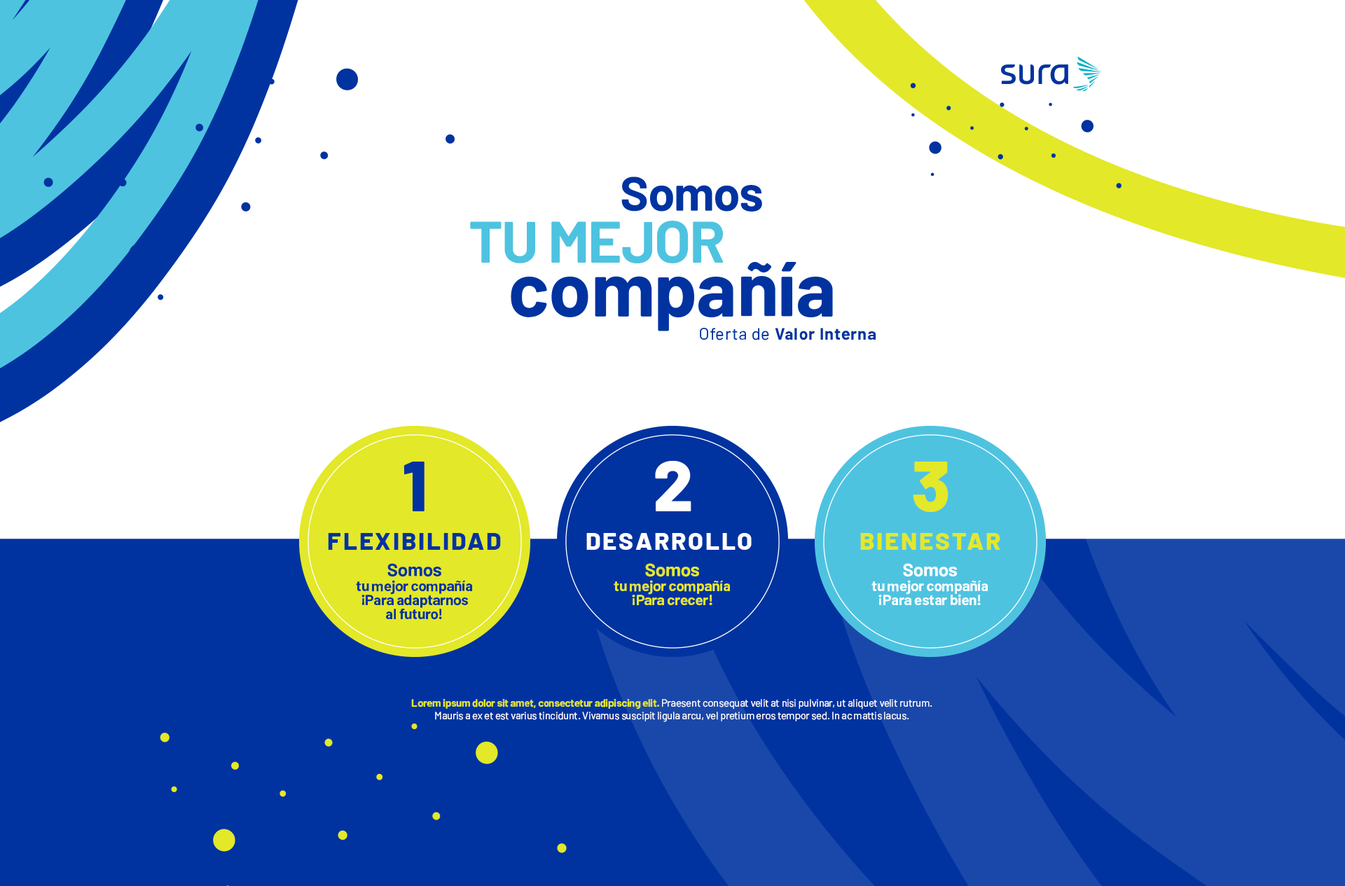
<style>
.page{position:relative;width:1345px;height:886px;background:#ffffff}
.page>*{position:absolute;margin:0}
.t1{font:71.2px "Barlow-ExtraBold";letter-spacing:0.06em;color:#0033a0}
.t2{font:71.2px "Barlow-ExtraBold";letter-spacing:0.06em;color:#ffffff}
.t3{font:71.2px "Barlow-ExtraBold";letter-spacing:0.06em;color:#e3e829}
.t4{font:24.5px "Barlow-ExtraBold";letter-spacing:0.08em;color:#0033a0}
.t5{font:24.5px "Barlow-ExtraBold";letter-spacing:0.08em;color:#ffffff;text-transform:uppercase}
.t6{font:24.5px "Barlow-ExtraBold";letter-spacing:0.08em;color:#e3e829;text-transform:uppercase}
.t7{font:14.8px/14.1px "Barlow-Bold";letter-spacing:-0.02em;color:#0033a0}
.t8{font:18.5px/14.1px "Barlow-Bold";letter-spacing:-0.02em;color:#0033a0}
.t9{font:14.8px/14.1px "Barlow-Bold";letter-spacing:-0.02em;color:#e3e829}
.t10{font:18.5px/14.1px "Barlow-Bold";letter-spacing:-0.02em;color:#e3e829}
.t11{font:14.8px/14.1px "Barlow-Bold";letter-spacing:-0.02em;color:#ffffff}
.t12{font:18.5px/14.1px "Barlow-Bold";letter-spacing:-0.02em;color:#ffffff}
.t13{font:10.5px/12.9px "Barlow-Regular";letter-spacing:-0.02em;color:#ffffff}
.t14{font:10.5px/12.9px "Barlow-Bold";letter-spacing:-0.02em;color:#e3e829}
</style>
<div class="page">
<p class="t1" style="left:404px;top:462px;width:21px;height:49px">1</p>
<p class="t2" style="left:655px;top:461px;width:37px;height:50px">2</p>
<p class="t3" style="left:913px;top:462px;width:36px;height:50px">3</p>
<p class="t4" style="left:328px;top:533px;width:173px;height:17px">FLEXIBILIDAD</p>
<p class="t5" style="left:586px;top:533px;width:166px;height:17px">Desarrollo</p>
<p class="t6" style="left:860px;top:533px;width:141px;height:17px">bienestar</p>
<p class="t7" style="left:356px;top:563px;width:116px;height:57px;text-align:center"><span class="t8">Somos<br></span>tu mejor compañía<br>¡Para adaptarnos al futuro!</p>
<p class="t9" style="left:614px;top:563px;width:116px;height:42px;text-align:center"><span class="t10">Somos<br></span>tu mejor compañía<br>¡Para crecer!</p>
<p class="t11" style="left:872px;top:563px;width:116px;height:42px;text-align:center"><span class="t12">Somos<br></span>tu mejor compañía<br>¡Para estar bien!</p>
<p class="t13" style="left:411px;top:699px;width:522px;height:23px;text-align:center"><span class="t14">Lorem ipsum dolor sit amet, consectetur adipiscing elit. </span>Praesent consequat velit at nisi pulvinar, ut aliquet velit rutrum. Mauris a ex et est varius tincidunt. Vivamus suscipit ligula arcu, vel pretium eros tempor sed. In ac mattis lacus.</p>
</div>
